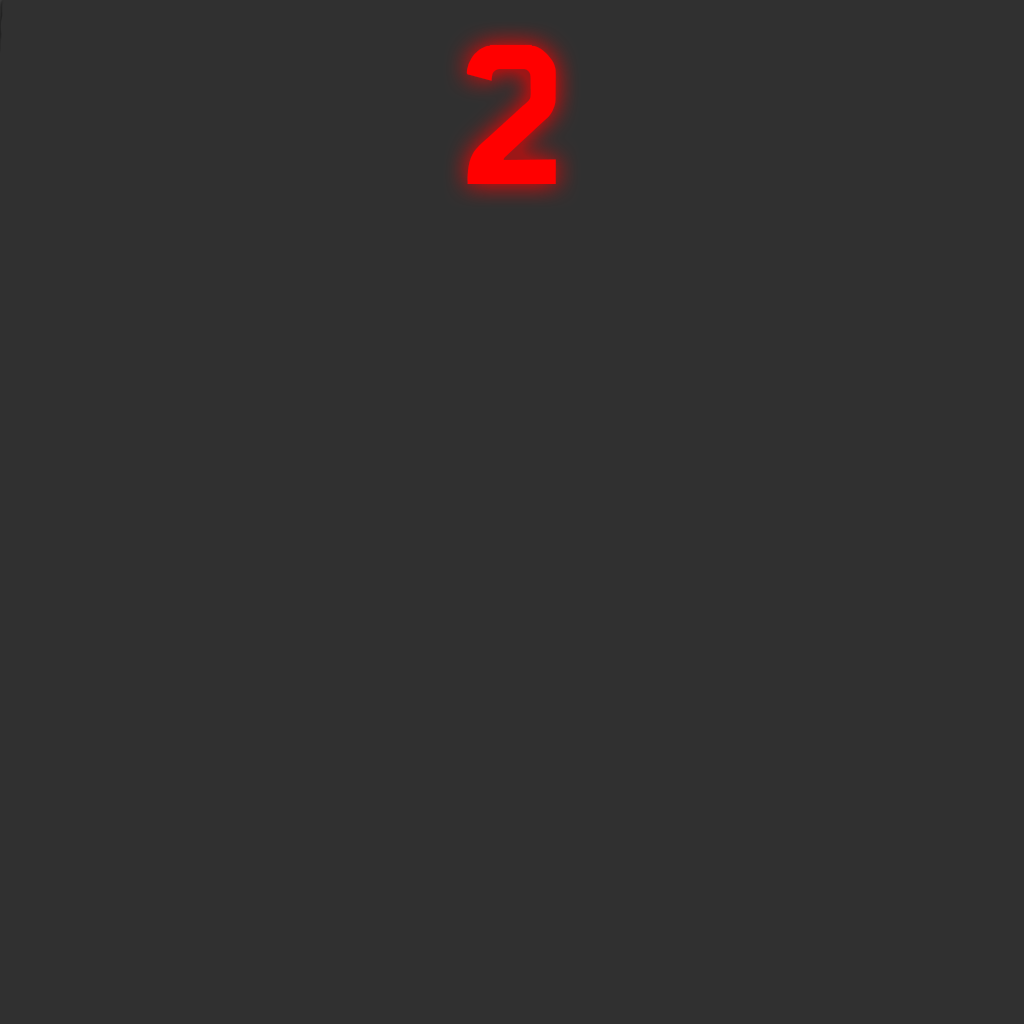
<style>
.page{position:relative;width:1024px;height:1024px;background:#303030}
.page>*{position:absolute;margin:0}
.t1{font:203.8px "UKNumberPlate";color:#ff0000}
</style>
<div class="page">
<p class="t1" style="left:466px;top:44px;width:90px;height:140px">2</p>
</div>
